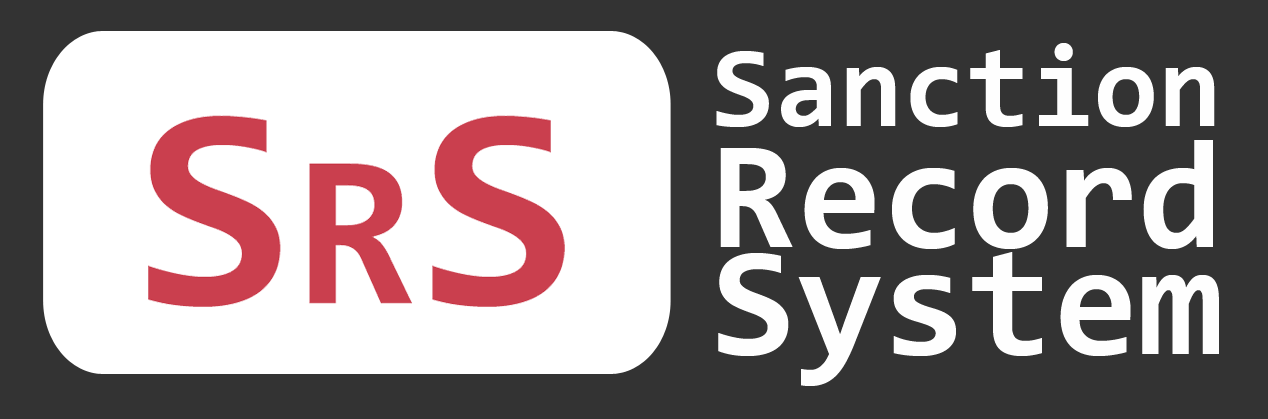
<style>
.page{position:relative;width:1268px;height:419px;background:#333333}
.page>*{position:absolute;margin:0}
.t1{font:116.1px "Consolas-Bold";color:#fefefe}
.t2{font:155.4px/120.8px "Consolas-Bold";color:#fefefe}
.t3{font:155.4px/107.4px "Consolas-Bold";color:#fefefe}
</style>
<div class="page">
<p class="t1" style="left:716px;top:43px;width:503px;height:343px">Sanction <br><span class="t2">Record <br></span><span class="t3">System</span></p>
</div>
